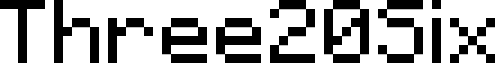
<style>
.page{position:relative;width:495px;height:63px;background:#ffffff}
.page>*{position:absolute;margin:0}
.t1{font:72px "Minecraft";color:#000000}
</style>
<div class="page">
<p class="t1" style="left:0px;top:0px;width:495px;height:63px">Three20Six</p>
</div>
